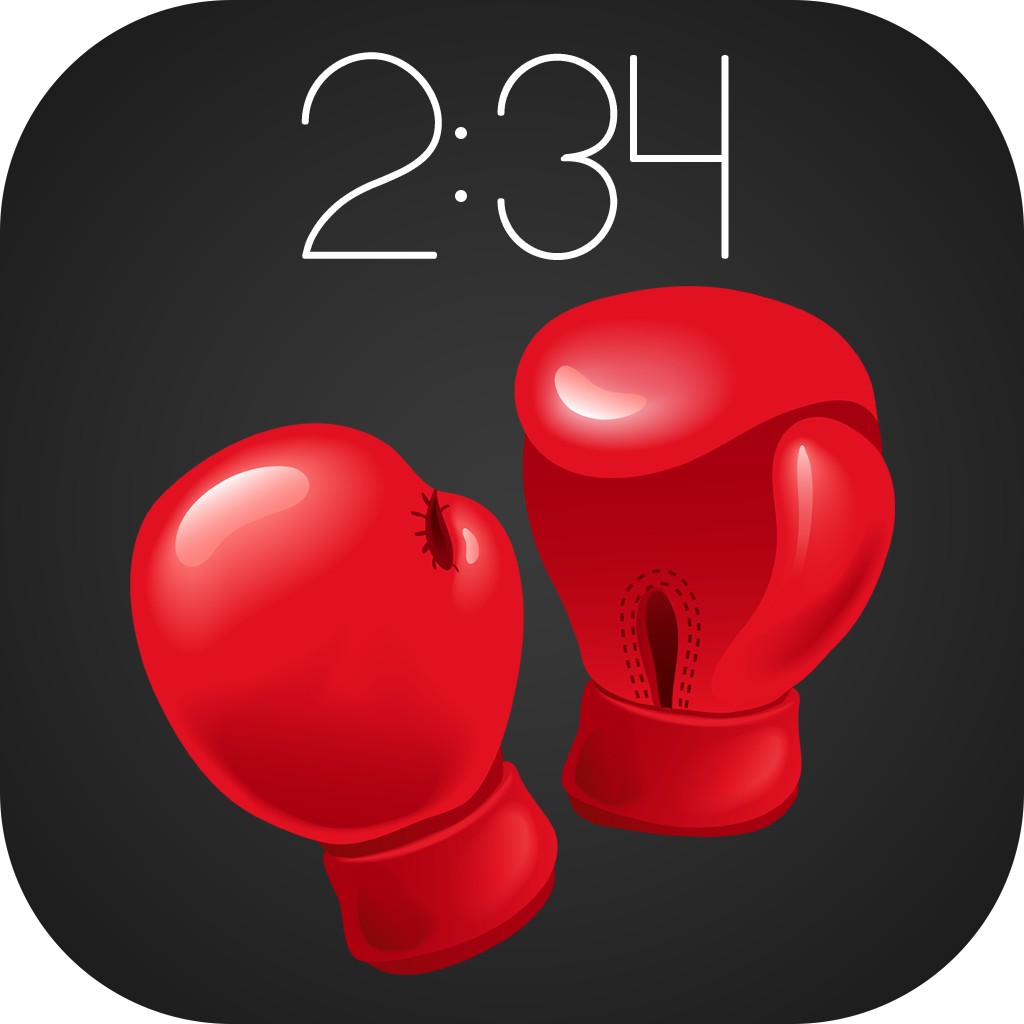
<style>
.page{position:relative;width:1024px;height:1024px}
.page>*{position:absolute;margin:0}
.t1{font:266.7px "EuropeUnderground-Light";letter-spacing:0.02em;color:#ffffff}
.t2{font:266.7px "EuropeUnderground-Light";letter-spacing:0.18em;color:#ffffff}
</style>
<div class="page">
<p class="t1" style="left:303px;top:54px;width:424px;height:204px"><span class="t2">2</span>34</p>
</div>
